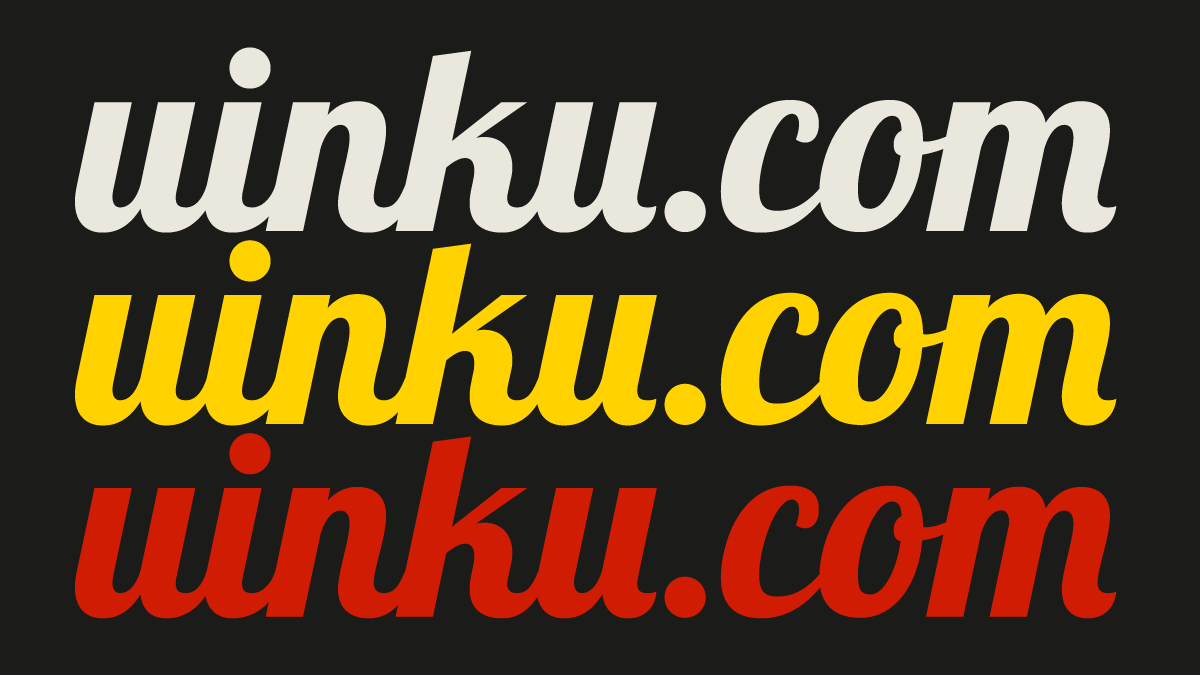
<style>
.page{position:relative;width:1200px;height:675px;background:#1b1b1a}
.page>*{position:absolute;margin:0}
.t1{font:257.1px "Lobster1.4";color:#eae7dd}
.t2{font:257.1px "Lobster1.4";color:#ffd200}
.t3{font:257.1px "Lobster1.4";color:#d11c04}
</style>
<div class="page">
<p class="t1" style="left:75px;top:47px;width:1042px;height:186px">uinku.com</p>
<p class="t2" style="left:75px;top:240px;width:1042px;height:186px">uinku.com</p>
<p class="t3" style="left:75px;top:433px;width:1042px;height:186px">uinku.com</p>
</div>
